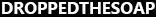
<style>
.page{position:relative;width:156px;height:17px;background:#000000}
.page>*{position:absolute;margin:0}
.t1{font:16.8px "MyanmarText-Bold";color:#ffffff}
</style>
<div class="page">
<p class="t1" style="left:2px;top:2px;width:153px;height:12px">DROPPEDTHESOAP</p>
</div>
